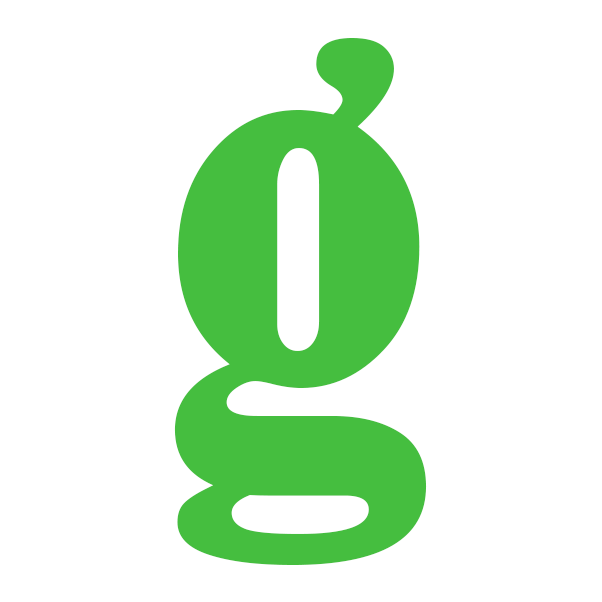
<style>
.page{position:relative;width:602px;height:602px;background:#ffffff}
.page>*{position:absolute;margin:0}
.t1{font:572px "BernardMT-Condensed";color:#45be3f}
</style>
<div class="page">
<p class="t1" style="left:174px;top:38px;width:253px;height:527px">g</p>
</div>
